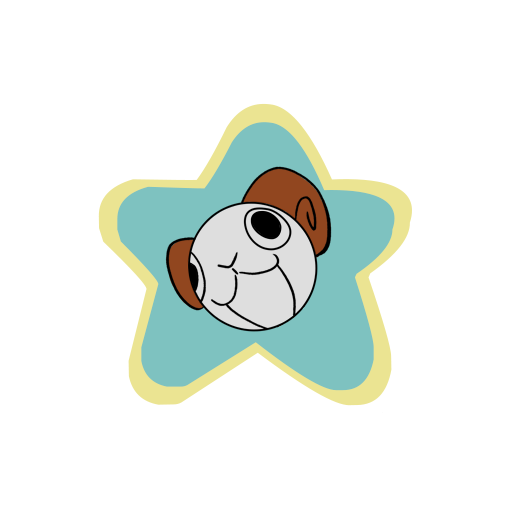
<style>
.page{position:relative;width:512px;height:512px;background:#ffffff}
.page>*{position:absolute;margin:0}
.t1{font:339px "Starborn"}
.t2{font:300px "Starborn";color:#7ec2c0}
</style>
<div class="page">
<p class="t1" style="left:98px;top:103px;width:314px;height:303px;rotate:-1deg">a</p>
<p class="t2" style="left:117px;top:122px;width:278px;height:269px">a</p>
</div>
